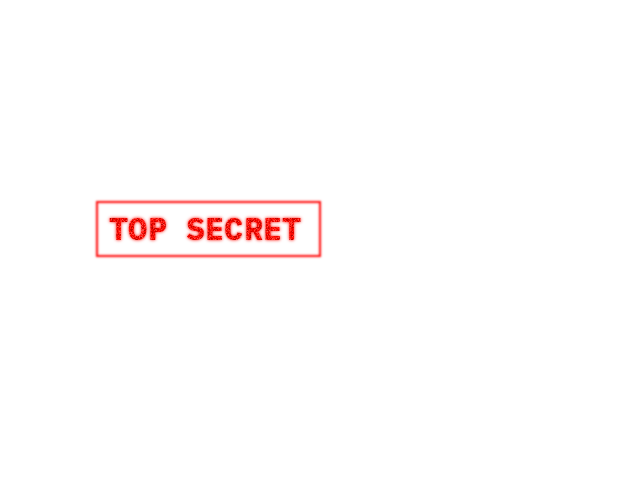
<style>
.page{position:relative;width:640px;height:480px;background:#ffffff}
.page>*{position:absolute;margin:0}
.t1{font:32px "IBMPlexMono-Bold"}
</style>
<div class="page">
<p class="t1" style="left:109px;top:218px;width:192px;height:22px">TOP SECRET</p>
</div>
